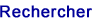
<style>
.page{position:relative;width:100px;height:20px;background:#ffffff}
.page>*{position:absolute;margin:0}
.t1{font:16px "ArialMT";letter-spacing:0.04em;color:#000099;font-weight:bold}
</style>
<div class="page">
<p class="t1" style="left:0px;top:5px;width:92px;height:13px">Rechercher</p>
</div>
